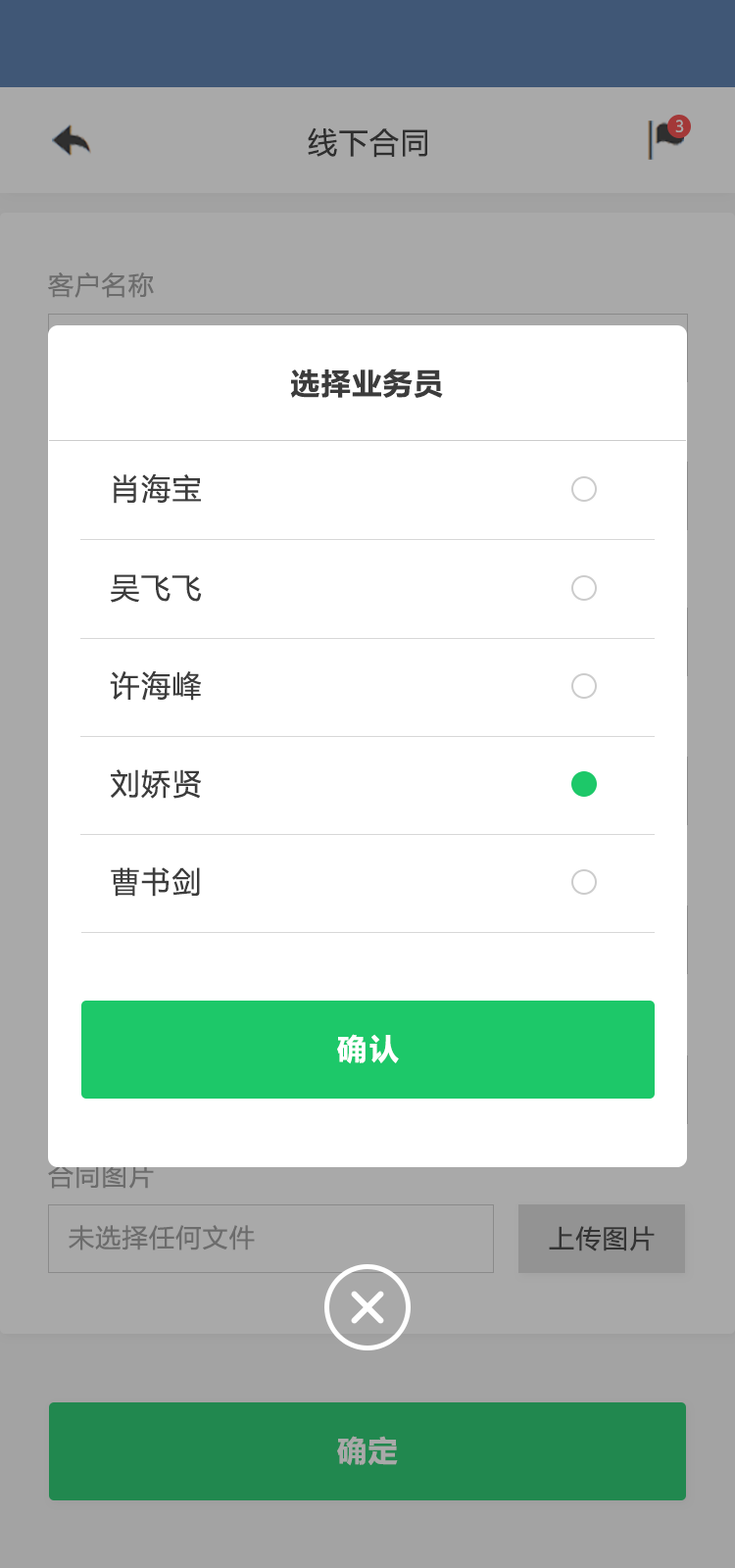
<style>
.page{position:relative;width:735px;height:1568px;background:#ffffff}
.page>*{position:absolute;margin:0}
.t1{font:15.7px "MicrosoftYaHeiUI";color:#a9a9a9}
.t2{font:29.4px "MicrosoftYaHeiUI";letter-spacing:0.05em;color:#333333}
.t3{font:25.5px "MicrosoftYaHeiUI";letter-spacing:0.05em;color:#6c6c6c}
.t4{font:29.4px "MicrosoftYaHeiUI-Bold";letter-spacing:0.05em;color:#3c3c3c}
.t5{font:29.4px "MicrosoftYaHeiUI";letter-spacing:0.05em;color:#3c3c3c}
.t6{font:29.4px "MicrosoftYaHeiUI-Bold";letter-spacing:0.1em;color:#ffffff}
.t7{font:25.5px "MicrosoftYaHeiUI";letter-spacing:0.05em;color:#3c3c3c}
.t8{font:29.4px "MicrosoftYaHeiUI-Bold";letter-spacing:0.05em;color:#a9a9a9}
</style>
<div class="page">
<p class="t1" style="left:675px;top:120px;width:9px;height:12px">3</p>
<p class="t2" style="left:308px;top:127px;width:119px;height:31px">线下合同</p>
<p class="t3" style="left:48px;top:272px;width:106px;height:26px">客户名称</p>
<p class="t4" style="left:290px;top:368px;width:153px;height:30px">选择业务员</p>
<p class="t5" style="left:113px;top:474px;width:88px;height:30px">肖海宝</p>
<p class="t5" style="left:111px;top:574px;width:91px;height:29px">吴飞飞</p>
<p class="t5" style="left:110px;top:671px;width:92px;height:30px">许海峰</p>
<p class="t5" style="left:111px;top:769px;width:91px;height:30px">刘娇贤</p>
<p class="t5" style="left:111px;top:867px;width:89px;height:30px">曹书剑</p>
<p class="t6" style="left:337px;top:1034px;width:62px;height:30px">确认</p>
<p class="t3" style="left:48px;top:1163px;width:106px;height:26px">合同图片</p>
<p class="t3" style="left:69px;top:1225px;width:186px;height:25px">未选择任何文件</p>
<p class="t7" style="left:549px;top:1226px;width:106px;height:25px">上传图片</p>
<p class="t8" style="left:337px;top:1436px;width:61px;height:30px">确定</p>
</div>
